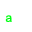
<style>
.page{position:relative;width:32px;height:32px;background:#ffffff}
.page>*{position:absolute;margin:0}
.t1{font:12px "ArialMT";letter-spacing:0.015em;color:#00ff11}
</style>
<div class="page">
<p class="t1" style="left:5px;top:15px;width:7px;height:7px">a</p>
</div>
